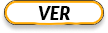
<style>
.page{position:relative;width:108px;height:33px;background:#ffffff}
.page>*{position:absolute;margin:0}
.t1{font:17.6px "Lato-BlackItalic";color:#000000}
</style>
<div class="page">
<p class="t1" style="left:38px;top:6px;width:32px;height:14px">VER</p>
</div>
